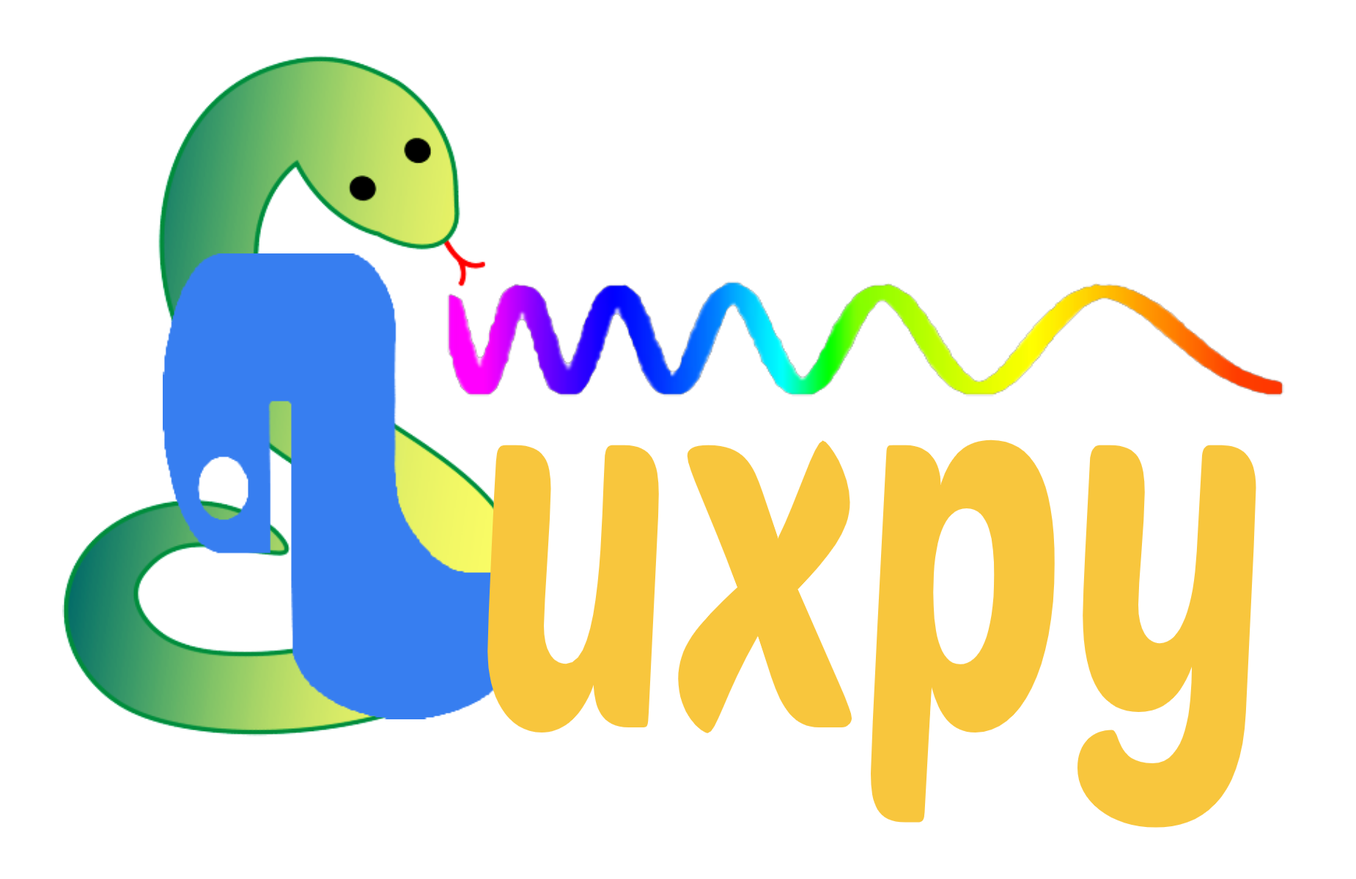
<style>
.page{position:relative;width:1356px;height:879px;background:#ffffff}
.page>*{position:absolute;margin:0}
.t1{font:513.3px "PoetsenOne-Regular";color:#f8c63d;scale:0.65 1}
</style>
<div class="page">
<p class="t1" style="left:487px;top:440px;width:769px;height:388px">uxpy</p>
</div>
